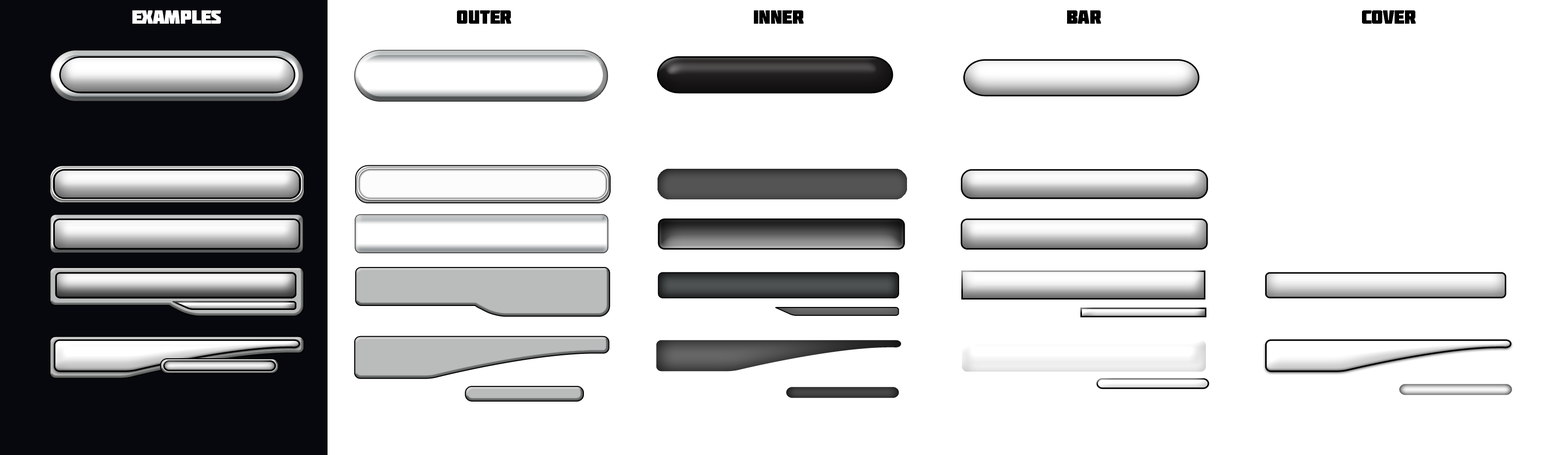
<style>
.page{position:relative;width:1568px;height:455px;background:#ffffff}
.page>*{position:absolute;margin:0}
.t1{font:19.1px "Molot";letter-spacing:-0.025em;color:#ffffff;scale:1.06 1}
.t2{font:19.1px "Molot";letter-spacing:-0.025em;color:#000000;scale:1.06 1}
</style>
<div class="page">
<p class="t1" style="left:132px;top:10px;width:89px;height:14px">Examples</p>
<p class="t2" style="left:457px;top:10px;width:54px;height:14px">OUTER</p>
<p class="t2" style="left:754px;top:10px;width:50px;height:14px">INNER</p>
<p class="t2" style="left:1067px;top:10px;width:34px;height:14px">BAR</p>
<p class="t2" style="left:1362px;top:10px;width:54px;height:14px">COVER</p>
</div>
